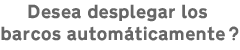
<style>
.page{position:relative;width:240px;height:50px;background:#ffffff}
.page>*{position:absolute;margin:0}
.t1{font:18px "Transport-Heavy-Regular";color:#666666}
</style>
<div class="page">
<p class="t1" style="left:1px;top:4px;width:238px;height:37px;text-align:center">Desea desplegar los <br>barcos automáticamente?</p>
</div>
